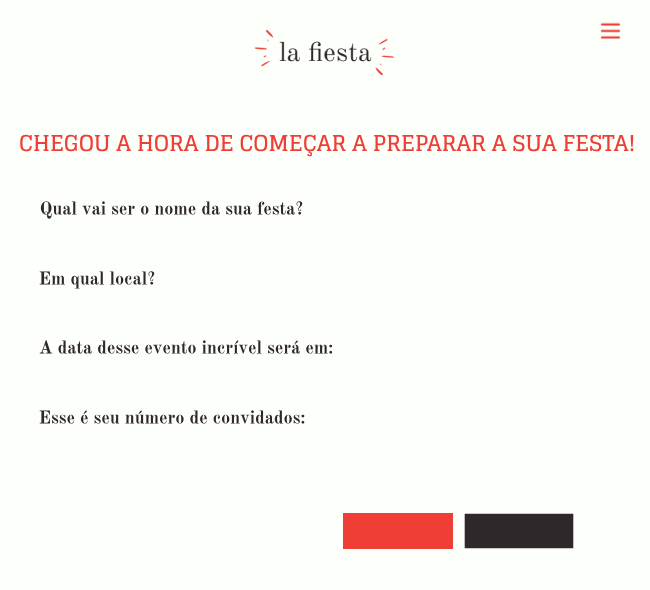
<style>
.page{position:relative;width:650px;height:590px;background:#fdfffb}
.page>*{position:absolute;margin:0}
.t1{font:22px "Glegoo-Bold";color:#ef3e36}
.t2{font:18px "OldStandardTT-Bold";color:#2e282a}
</style>
<div class="page">
<p class="t1" style="left:20px;top:134px;width:614px;height:23px">CHEGOU A HORA DE COMEÇAR A PREPARAR A SUA FESTA!</p>
<p class="t2" style="left:40px;top:201px;width:263px;height:18px">Qual vai ser o nome da sua festa?</p>
<p class="t2" style="left:39px;top:271px;width:116px;height:18px">Em qual local?</p>
<p class="t2" style="left:39px;top:340px;width:294px;height:14px">A data desse evento incrível será em:</p>
<p class="t2" style="left:39px;top:410px;width:266px;height:14px">Esse é seu número de convidados:</p>
</div>
